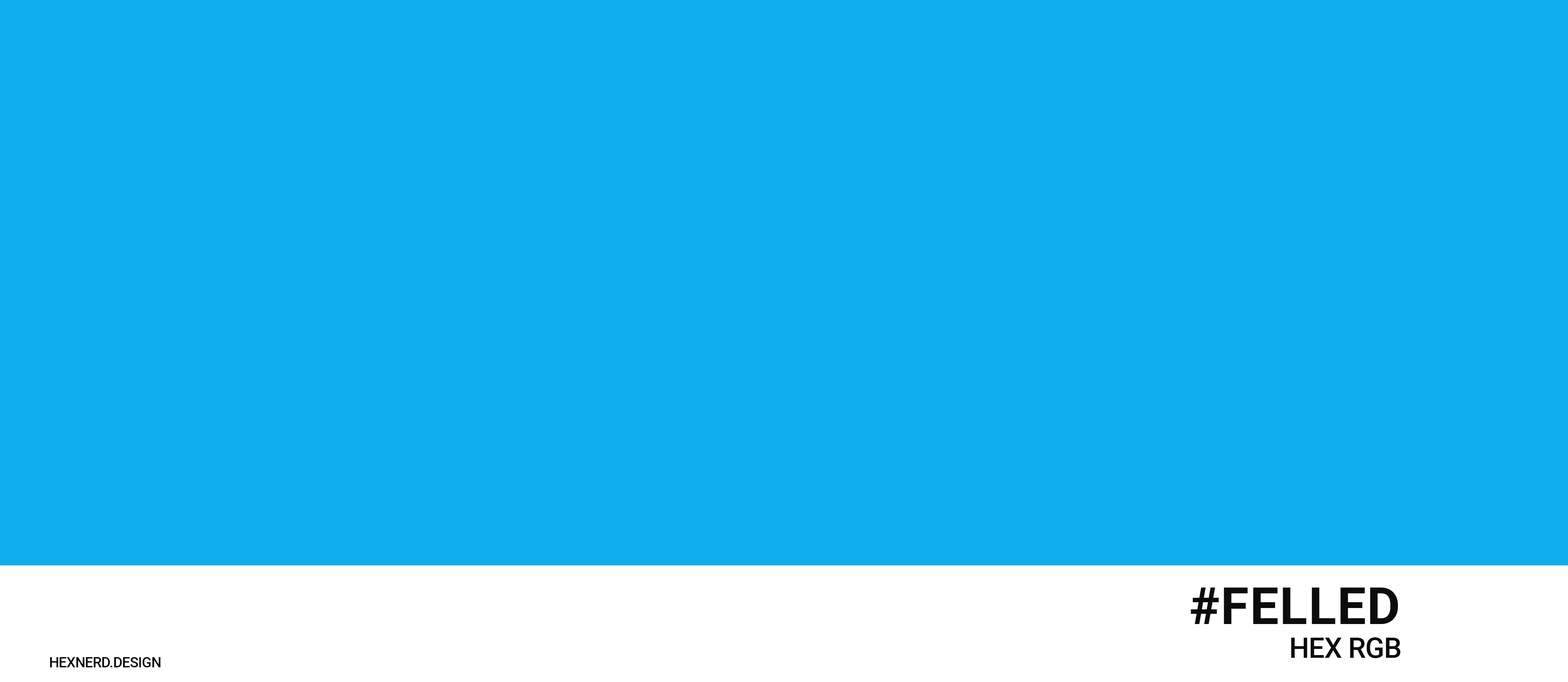
<style>
.page{position:relative;width:1568px;height:682px;background:#10aded}
.page>*{position:absolute;margin:0}
.t1{font:51.2px "Roboto-Bold";letter-spacing:0.02em;color:#0c0c0b}
.t2{font:28.4px "Roboto-Medium";letter-spacing:-0.02em;color:#0c0c0b}
.t3{font:14.2px "Roboto-Medium";letter-spacing:-0.02em;color:#0c0c0b}
</style>
<div class="page">
<p class="t1" style="left:1191px;top:587px;width:207px;height:37px">#FELLED</p>
<p class="t2" style="left:1291px;top:637px;width:110px;height:21px">HEX RGB</p>
<p class="t3" style="left:50px;top:657px;width:111px;height:10px">HEXNERD.DESIGN</p>
</div>
